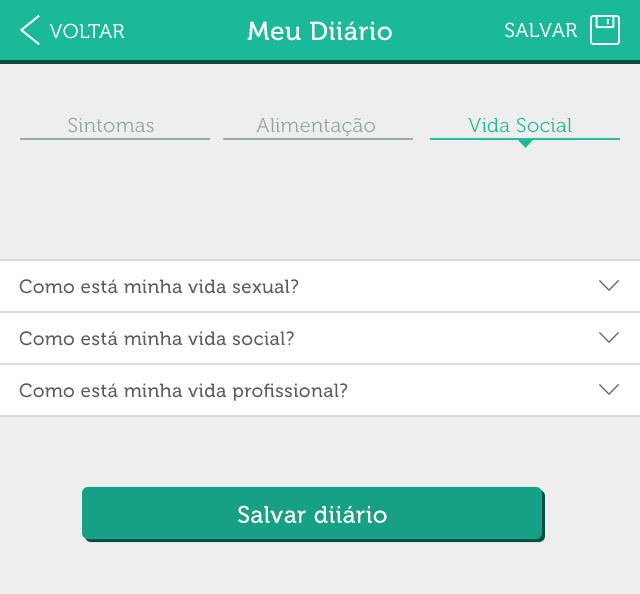
<style>
.page{position:relative;width:640px;height:594px;background:#eeeeee}
.page>*{position:absolute;margin:0}
.t1{font:20px "Museo300-Regular";letter-spacing:0.02em;color:#ffffff;text-transform:uppercase}
.t2{font:26px "Museo500-Regular";letter-spacing:0.02em;color:#ffffff}
.t3{font:20px "Museo300-Regular";letter-spacing:0.02em;color:#95a5a6}
.t4{font:20px "Museo300-Regular";letter-spacing:0.02em;color:#19b99a}
.t5{font:19px "Museo500-Regular";letter-spacing:0.02em;color:#5c5c5c}
.t6{font:23.8px "Museo500-Regular";letter-spacing:0.02em;color:#ffffff}
</style>
<div class="page">
<p class="t1" style="left:49px;top:23px;width:76px;height:16px">Voltar</p>
<p class="t2" style="left:247px;top:21px;width:145px;height:20px">Meu Diiário</p>
<p class="t1" style="left:505px;top:22px;width:72px;height:16px">SALVAR</p>
<p class="t3" style="left:68px;top:117px;width:86px;height:16px">Sintomas</p>
<p class="t3" style="left:256px;top:118px;width:119px;height:18px">Alimentação</p>
<p class="t4" style="left:468px;top:117px;width:104px;height:16px">Vida Social</p>
<p class="t5" style="left:19px;top:279px;width:280px;height:15px">Como está minha vida sexual?</p>
<p class="t5" style="left:19px;top:331px;width:275px;height:15px">Como está minha vida social?</p>
<p class="t5" style="left:19px;top:383px;width:329px;height:18px">Como está minha vida profissional?</p>
<p class="t6" style="left:238px;top:505px;width:149px;height:18px">Salvar diiário</p>
</div>
